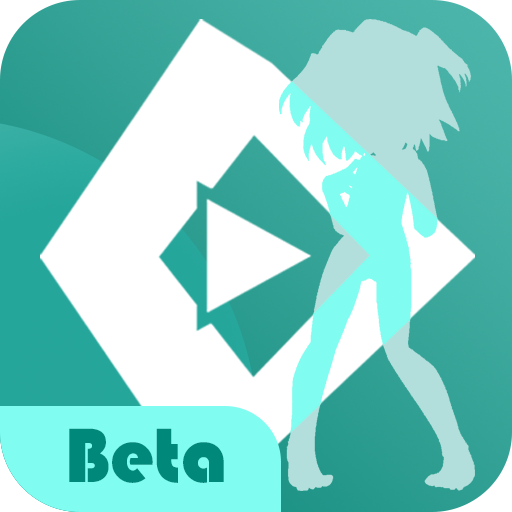
<style>
.page{position:relative;width:512px;height:512px;background:#ffffff}
.page>*{position:absolute;margin:0}
.t1{font:80px "STHupo";color:#00897b}
</style>
<div class="page">
<p class="t1" style="left:69px;top:428px;width:155px;height:55px">Beta</p>
</div>
